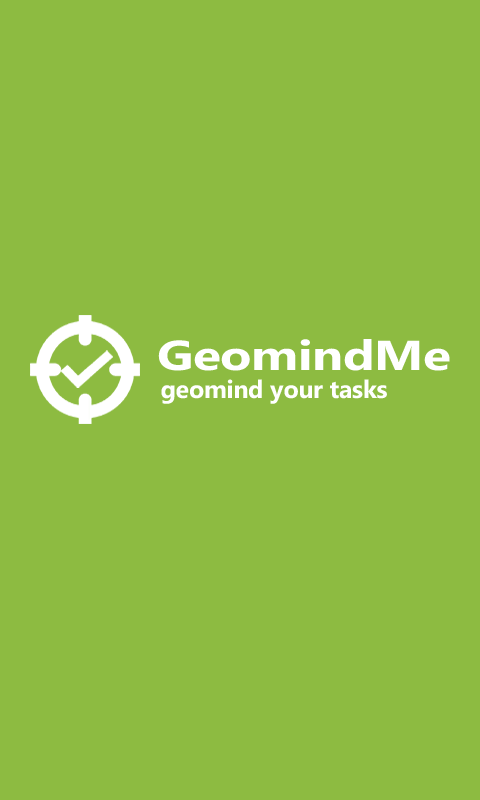
<style>
.page{position:relative;width:480px;height:800px;background:#8dbb41}
.page>*{position:absolute;margin:0}
.t1{font:41.7px "SegoeWP-Bold";letter-spacing:-0.01em;color:#ffffff;scale:1.24 1}
.t2{font:25px "SegoeWP-Bold";letter-spacing:-0.01em;color:#ffffff}
</style>
<div class="page">
<p class="t1" style="left:158px;top:339px;width:292px;height:32px">GeomindMe</p>
<p class="t2" style="left:161px;top:379px;width:226px;height:25px">geomind your tasks</p>
</div>
